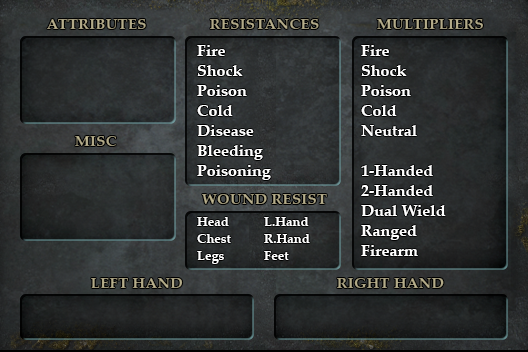
<style>
.page{position:relative;width:528px;height:352px}
.page>*{position:absolute;margin:0}
.t1{font:15px "PalatinoLinotype-Bold";letter-spacing:0.02em;color:#a9a181}
.t2{font:15px "PalatinoLinotype-Bold";letter-spacing:0.02em;color:#a8a080}
.t3{font:15px "PalatinoLinotype-Bold";letter-spacing:0.02em;color:#aea685}
.t4{font:16px/20px "PalatinoLinotype-Bold";color:#ffffff}
.t5{font:15px "PalatinoLinotype-Bold";letter-spacing:0.02em;color:#ada584}
.t6{font:13px/17px "PalatinoLinotype-Bold";color:#ffffff}
.t7{font:15px "PalatinoLinotype-Bold";letter-spacing:0.02em;color:#aba383}
.t8{font:15px "PalatinoLinotype-Bold";letter-spacing:0.02em;color:#a9a282}
</style>
<div class="page">
<p class="t1" style="left:47px;top:19px;width:99px;height:10px">ATTRIBUTES</p>
<p class="t2" style="left:210px;top:19px;width:109px;height:10px">RESISTANCES</p>
<p class="t3" style="left:377px;top:19px;width:106px;height:10px">MULTIPLIERS</p>
<p class="t4" style="left:197px;top:45px;width:50px;height:71px">Fire<br>Shock<br>Poison<br>Cold</p>
<p class="t4" style="left:361px;top:45px;width:85px;height:211px">Fire<br>Shock<br>Poison<br>Cold<br>Neutral<br><br>1-Handed<br>2-Handed<br>Dual Wield<br>Ranged<br>Firearm</p>
<p class="t4" style="left:197px;top:125px;width:74px;height:55px">Disease<br>Bleeding<br>Poisoning</p>
<p class="t3" style="left:75px;top:136px;width:42px;height:10px">MISC</p>
<p class="t5" style="left:202px;top:194px;width:125px;height:10px">WOUND RESIST</p>
<p class="t6" style="left:197px;top:217px;width:34px;height:47px">Head<br>Chest<br>Legs</p>
<p class="t6" style="left:264px;top:217px;width:46px;height:43px">L.Hand<br>R.Hand<br>Feet</p>
<p class="t7" style="left:91px;top:278px;width:92px;height:10px">LEFT HAND</p>
<p class="t8" style="left:337px;top:278px;width:107px;height:10px">RIGHT HAND</p>
</div>
